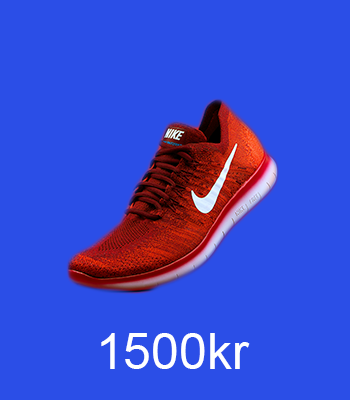
<style>
.page{position:relative;width:350px;height:400px;background:#2b4ee7}
.page>*{position:absolute;margin:0}
.t1{font:50px "ArialMT";color:#feffff}
</style>
<div class="page">
<p class="t1" style="left:101px;top:333px;width:149px;height:36px">1500kr</p>
</div>
